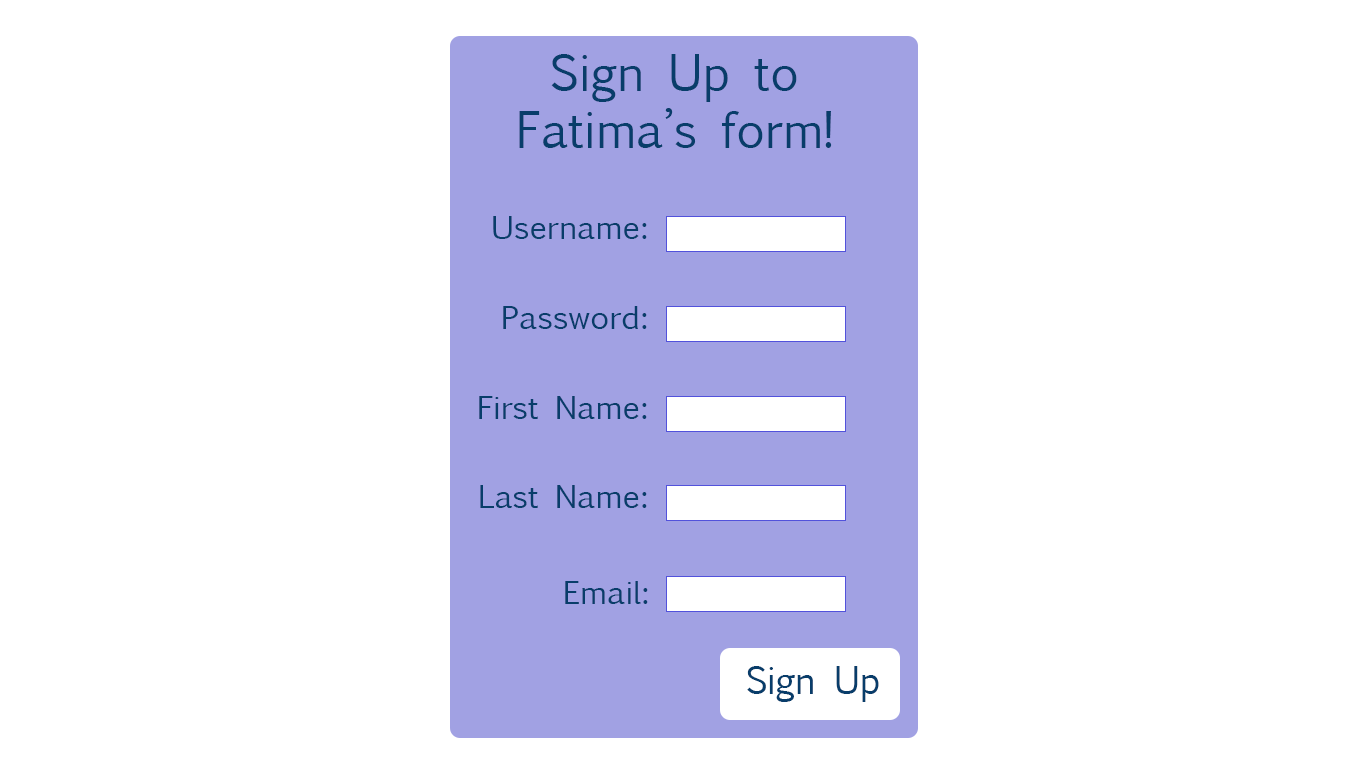
<style>
.page{position:relative;width:1366px;height:768px;background:#ffffff}
.page>*{position:absolute;margin:0}
.t1{font:48px "EuphemiaUCAS";color:#083d6a}
.t2{font:30px "EuphemiaUCAS";color:#083d6a;scale:1.07 1}
.t3{font:36px "EuphemiaUCAS";color:#083d6a}
</style>
<div class="page">
<p class="t1" style="left:519px;top:54px;width:313px;height:94px;text-align:center">Sign Up to Fatima’s form!</p>
<p class="t2" style="left:493px;top:216px;width:154px;height:23px">Username:</p>
<p class="t2" style="left:503px;top:306px;width:144px;height:23px">Password:</p>
<p class="t2" style="left:479px;top:396px;width:168px;height:23px">First Name:</p>
<p class="t2" style="left:480px;top:485px;width:167px;height:23px">Last Name:</p>
<p class="t2" style="left:565px;top:581px;width:83px;height:23px">Email:</p>
<p class="t3" style="left:747px;top:666px;width:132px;height:36px">Sign Up</p>
</div>
